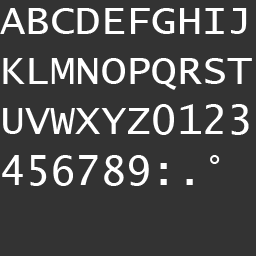
<style>
.page{position:relative;width:256px;height:256px;background:#333333}
.page>*{position:absolute;margin:0}
.t1{font:42px "LucidaConsole";color:#ffffff}
</style>
<div class="page">
<p class="t1" style="left:0px;top:8px;width:252px;height:178px">ABCDEFGHIJ<br>KLMNOPQRST<br>UVWXYZ0123<br>456789:.°</p>
</div>
